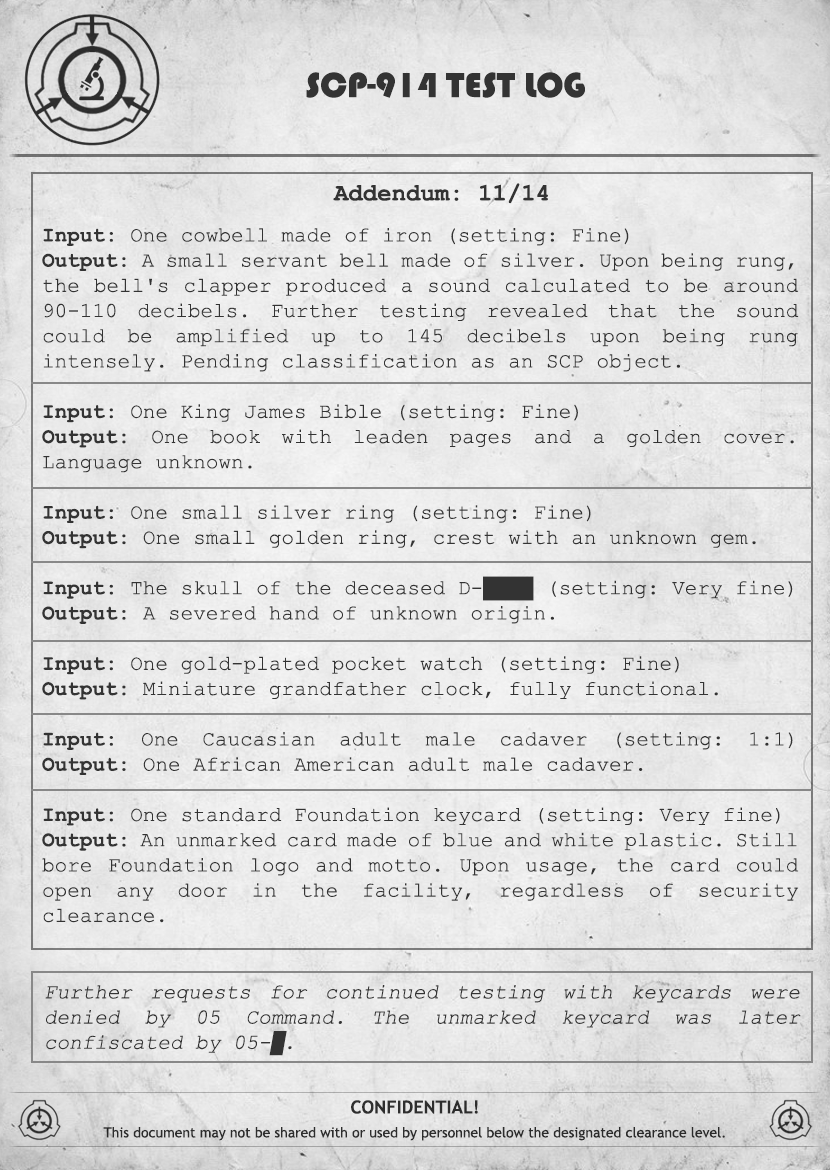
<style>
.page{position:relative;width:830px;height:1170px}
.page>*{position:absolute;margin:0}
.t1{font:36px "Bauhaus93";color:#333333;text-transform:uppercase}
.t2{font:24px "CourierNewPS-BoldMT";color:#333333}
.t3{font:21px "CourierNewPSMT";color:#333333}
.t4{font:21px "CourierNewPS-BoldMT";color:#333333}
.t5{font:21px "CourierNewPSMT";color:#333333;font-style:italic}
.t6{font:14px/24px "TrebuchetMS";color:#333333}
.t7{font:18px/24px "TrebuchetMS-Bold";color:#333333}
</style>
<div class="page">
<p class="t1" style="left:306px;top:72px;width:279px;height:26px">SCP-914 Test log</p>
<p class="t2" style="left:333px;top:183px;width:215px;height:21px">Addendum: 11/14</p>
<p class="t3" style="left:42px;top:228px;width:757px;height:695px;text-align:justify"><span class="t4">Input:</span> One cowbell made of iron (setting: Fine)<br><span class="t4">Output:</span> A small servant bell made of silver. Upon being rung, the bell's clapper produced a sound calculated to be around 90-110 decibels. Further testing revealed that the sound could be amplified up to 145 decibels upon being rung intensely. Pending classification as an SCP object.<br><br><span class="t4">Input:</span> One King James Bible (setting: Fine)<br><span class="t4">Output:</span> One book with leaden pages and a golden cover. Language unknown.<br><br><span class="t4">Input:</span> One small silver ring (setting: Fine)<br><span class="t4">Output:</span> One small golden ring, crest with an unknown gem.<br><br><span class="t4">Input:</span> The skull of the deceased D-████ (setting: Very fine)<br><span class="t4">Output:</span> A severed hand of unknown origin.<br><br><span class="t4">Input:</span> One gold-plated pocket watch (setting: Fine) <br><span class="t4">Output:</span> Miniature grandfather clock, fully functional.<br><br><span class="t4">Input:</span> One Caucasian adult male cadaver (setting: 1:1) <span class="t4">Output:</span> One African American adult male cadaver.<br><br><span class="t4">Input:</span> One standard Foundation keycard (setting: Very fine) <br><span class="t4">Output:</span> An unmarked card made of blue and white plastic. Still bore Foundation logo and motto. Upon usage, the card could open any door in the facility, regardless of security clearance.</p>
<p class="t5" style="left:45px;top:985px;width:756px;height:71px;text-align:justify">Further requests for continued testing with keycards were denied by 05 Command. The unmarked keycard was later confiscated by 05-█.</p>
<p class="t6" style="left:103px;top:1100px;width:622px;height:41px;text-align:center"><span class="t7">CONFIDENTIAL!<br></span>This document may not be shared with or used by personnel below the designated clearance level.</p>
</div>
